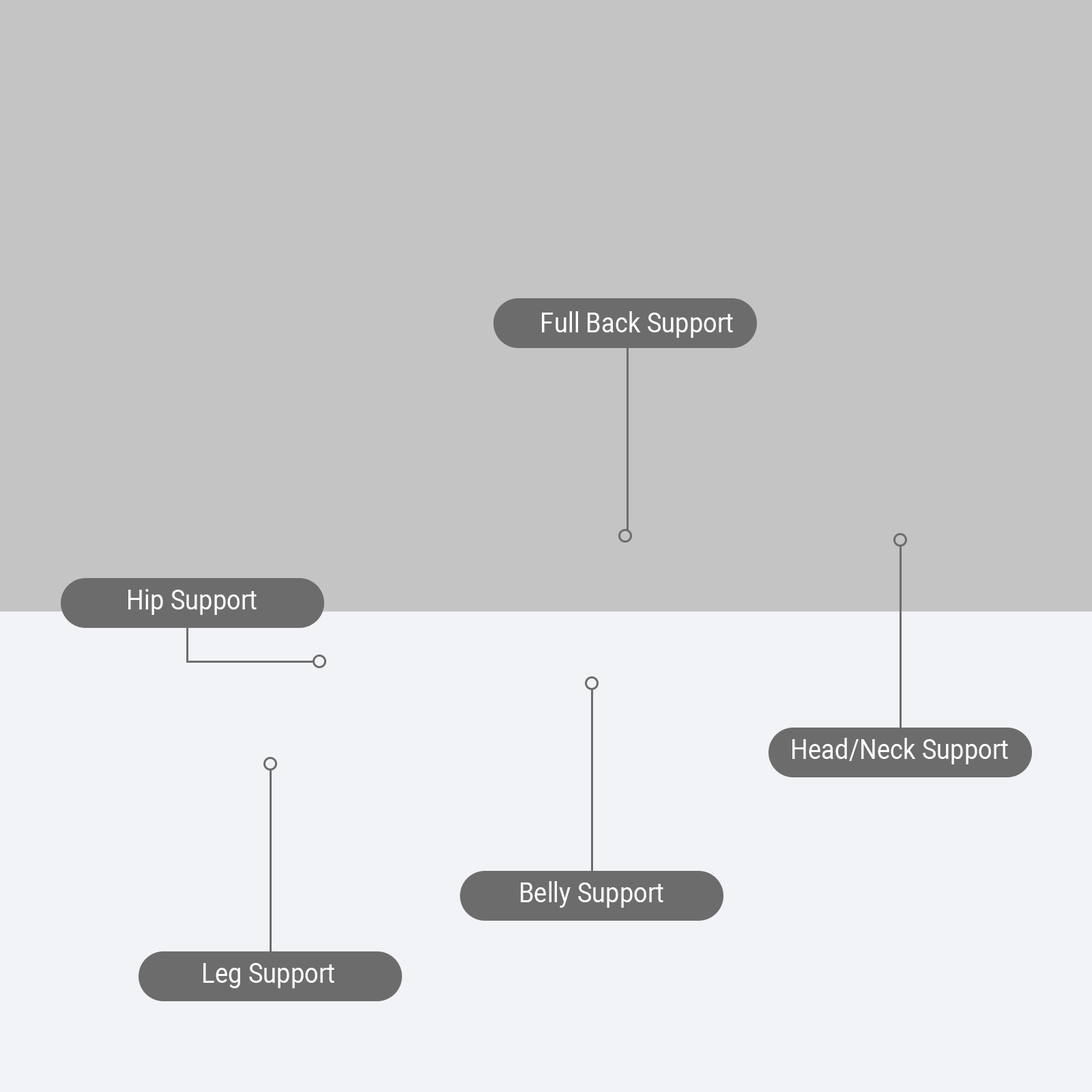
<style>
.page{position:relative;width:1092px;height:1092px;background:#c4c4c4}
.page>*{position:absolute;margin:0}
.t1{font:27.7px "Roboto-Regular";color:#ffffff;scale:0.9 1}
</style>
<div class="page">
<p class="t1" style="left:542px;top:311px;width:191px;height:27px">Full Back Support</p>
<p class="t1" style="left:128px;top:589px;width:129px;height:26px">Hip Support</p>
<p class="t1" style="left:792px;top:738px;width:216px;height:26px">Head/Neck Support</p>
<p class="t1" style="left:521px;top:881px;width:142px;height:27px">Belly Support</p>
<p class="t1" style="left:203px;top:963px;width:131px;height:25px">Leg Support</p>
</div>
